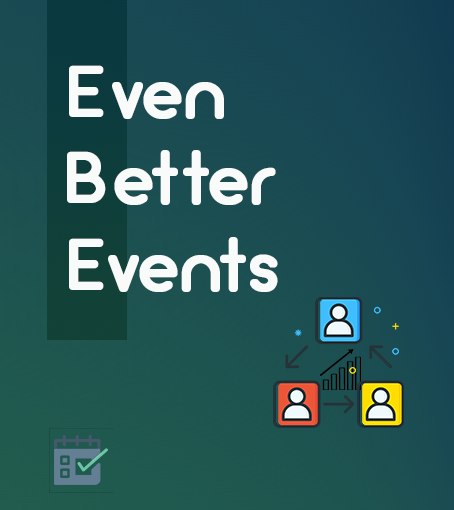
<style>
.page{position:relative;width:454px;height:510px}
.page>*{position:absolute;margin:0}
.t1{font:72px "Arciform";color:#f9fafa;font-weight:bold}
</style>
<div class="page">
<p class="t1" style="left:108px;top:82px;width:170px;height:210px;text-align:center">ven<br>  etter<br>  vents</p>
</div>
